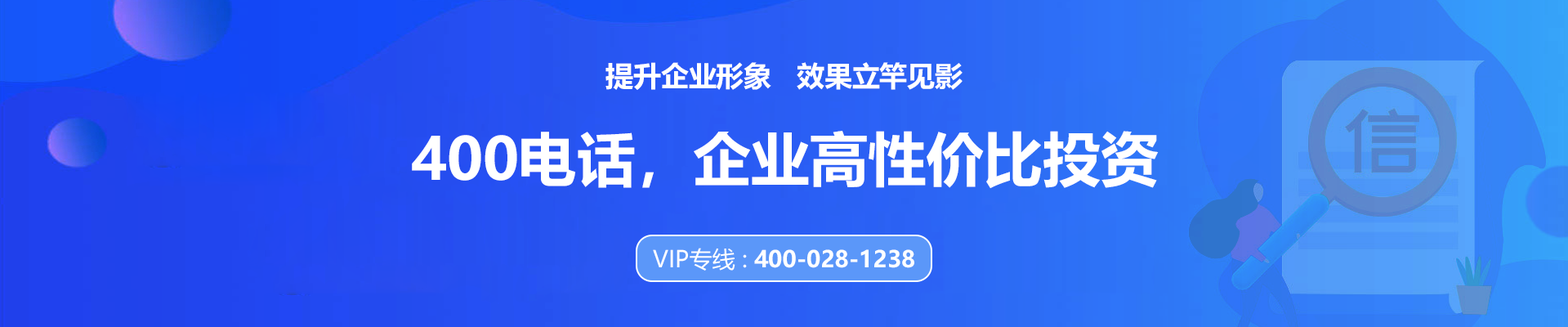
<style>
.page{position:relative;width:1568px;height:327px}
.page>*{position:absolute;margin:0}
.t1{font:27.7px "MicrosoftYaHei-Bold";color:#ffffff;text-transform:uppercase}
.t2{font:58.2px "MicrosoftYaHei-Bold";color:#ffffff;text-transform:uppercase}
.t3{font:22.9px "MicrosoftYaHei-Bold";color:#ffffff;text-transform:uppercase}
.t4{font:22.9px "MicrosoftYaHei";color:#ffffff;text-transform:uppercase}
</style>
<div class="page">
<p class="t1" style="left:605px;top:62px;width:358px;height:28px">提升企业形象   效果立竿见影</p>
<p class="t2" style="left:412px;top:131px;width:747px;height:58px">400电话，企业高性价比投资</p>
<p class="t3" style="left:653px;top:248px;width:261px;height:22px"><span class="t4">VIP专线 : </span>400-028-1238</p>
</div>
